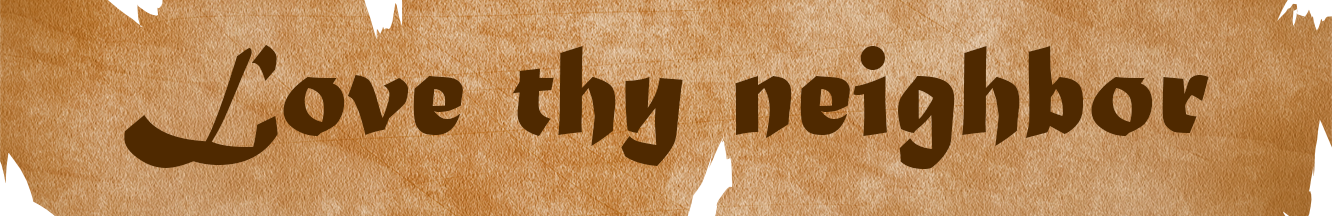
<style>
.page{position:relative;width:1332px;height:216px}
.page>*{position:absolute;margin:0}
.t1{font:135.4px "MaturaMTScriptCapitals";color:#4f2900}
</style>
<div class="page">
<p class="t1" style="left:124px;top:45px;width:1085px;height:124px">Love thy neighbor</p>
</div>
